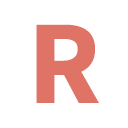
<style>
.page{position:relative;width:128px;height:128px;background:#ffffff}
.page>*{position:absolute;margin:0}
.t1{font:120px "SourceSansPro-Bold";color:#df7366}
</style>
<div class="page">
<p class="t1" style="left:36px;top:24px;width:63px;height:79px">R</p>
</div>
